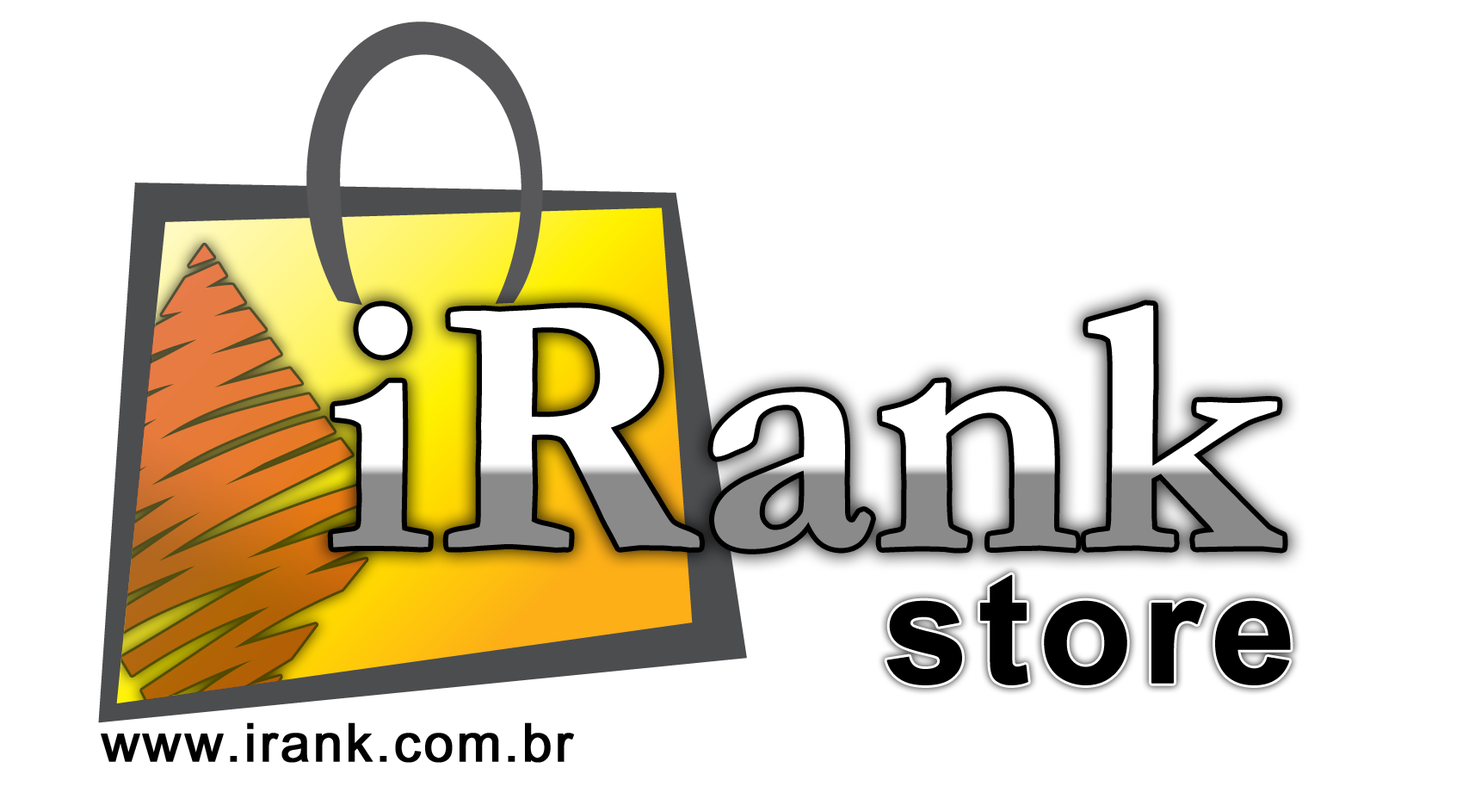
<style>
.page{position:relative;width:1481px;height:805px;background:#ffffff}
.page>*{position:absolute;margin:0}
.t1{font:153.1px "Arial-BoldMT";letter-spacing:0.035em;color:#000000;font-weight:bold}
.t2{font:53.1px "ArialMT";letter-spacing:0.035em;color:#000000;font-weight:bold}
</style>
<div class="page">
<p class="t1" style="left:887px;top:574px;width:404px;height:111px">store</p>
<p class="t2" style="left:101px;top:722px;width:473px;height:41px">www.irank.com.br</p>
</div>
